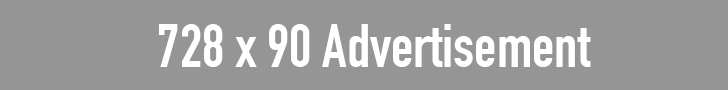
<style>
.page{position:relative;width:728px;height:90px;background:#959595}
.page>*{position:absolute;margin:0}
.t1{font:60px "DINCondensed-Bold";color:#ffffff}
</style>
<div class="page">
<p class="t1" style="left:159px;top:24px;width:432px;height:43px">728 x 90 Advertisement</p>
</div>
